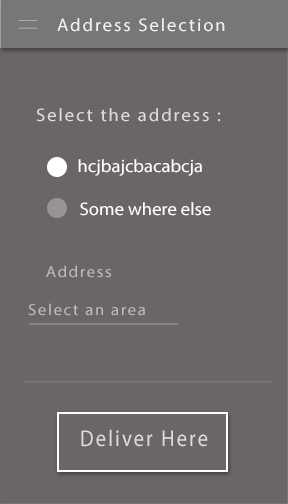
<style>
.page{position:relative;width:288px;height:504px;background:#6b6666}
.page>*{position:absolute;margin:0}
.t1{font:18px "MyriadPro-Regular";letter-spacing:0.1em;color:#f6f1f1;scale:1.04 1}
.t2{font:18px "MyriadPro-Regular";letter-spacing:0.1em;color:#dddcdc;scale:1.04 1}
.t3{font:18px "MyriadPro-Regular";color:#ffffff;scale:1.04 1}
.t4{font:16px "MyriadPro-Regular";letter-spacing:0.1em;color:#bebdbd;scale:1.04 1}
.t5{font:23px "MyriadPro-Regular";letter-spacing:0.1em;color:#dddcdc;scale:0.89 1}
</style>
<div class="page">
<p class="t1" style="left:57px;top:18px;width:168px;height:14px">Address Selection</p>
<p class="t2" style="left:36px;top:108px;width:185px;height:14px">Select the address :</p>
<p class="t3" style="left:78px;top:159px;width:124px;height:17px">hcjbajcbacabcja</p>
<p class="t3" style="left:80px;top:202px;width:131px;height:14px">Some where else</p>
<p class="t4" style="left:46px;top:265px;width:65px;height:13px">Address</p>
<p class="t4" style="left:28px;top:303px;width:117px;height:13px">Select an area</p>
<p class="t5" style="left:81px;top:429px;width:127px;height:18px">Deliver Here</p>
</div>
